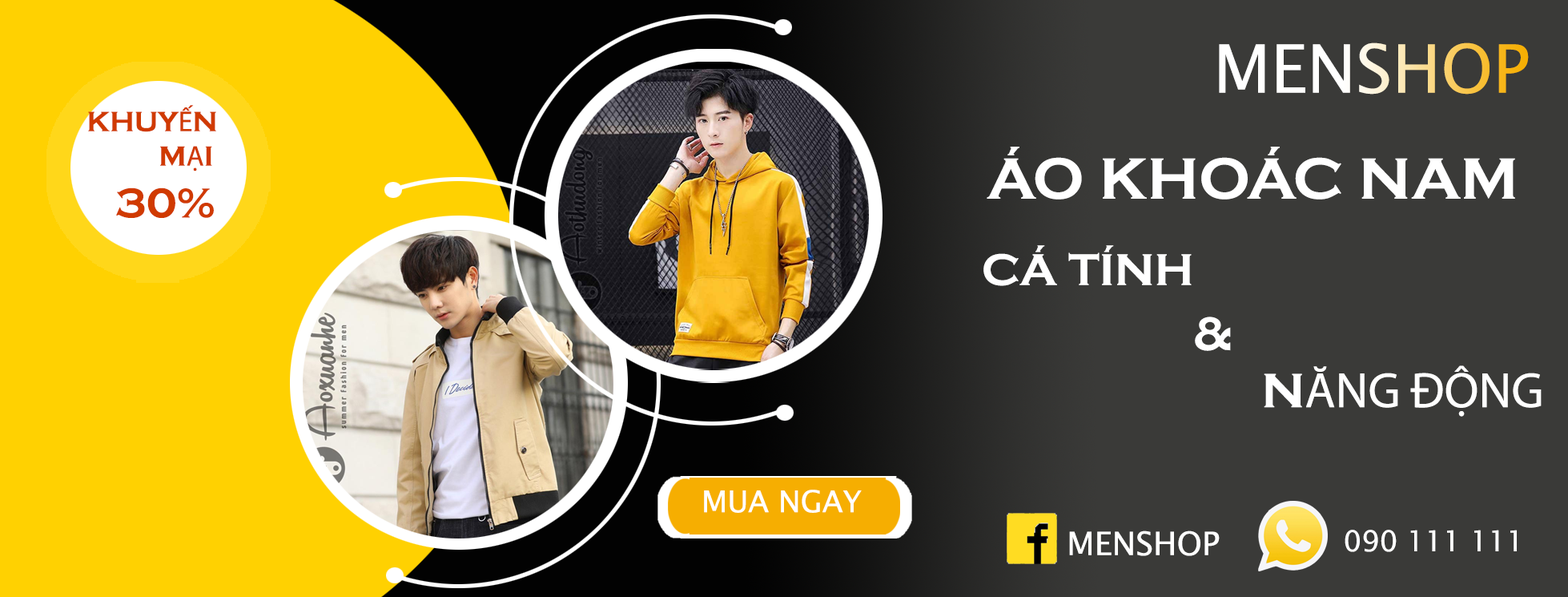
<style>
.page{position:relative;width:1568px;height:597px;background:#3a3a38}
.page>*{position:absolute;margin:0}
.t1{font:66.7px "LucidaSans"}
.t2{font:28.8px "CopperplateGothic-Bold";color:#d03a00}
.t3{font:28.8px "MyriadPro-Regular";color:#d03a00}
.t4{font:43.1px "CopperplateGothic-Bold";color:#d03a00}
.t5{font:60.1px "CopperplateGothic-Bold";color:#ffffff}
.t6{font:45.9px "CopperplateGothic-Bold";color:#ffffff}
.t7{font:48.6px "CopperplateGothic-Bold";color:#ffffff}
.t8{font:49.8px "MyriadPro-Regular";color:#ffffff}
.t9{font:49.8px "CopperplateGothic-Bold";color:#ffffff}
.t10{font:30px "LucidaSans";color:#ffffff}
.t11{font:32.3px "LucidaSans";color:#ffffff}
.t12{font:28.6px "LucidaSans";color:#ffffff}
</style>
<div class="page">
<p class="t1" style="left:1219px;top:42px;width:310px;height:52px">MENSHOP</p>
<p class="t2" style="left:88px;top:105px;width:128px;height:113px">KHUY<span class="t3">Ế</span>N<br>          M<span class="t3">Ạ</span>I<br>    <span class="t4">30%</span></p>
<p class="t5" style="left:987px;top:147px;width:528px;height:52px">ÁO KHOÁC NAM</p>
<p class="t6" style="left:983px;top:245px;width:209px;height:41px">CÁ TÍNH</p>
<p class="t7" style="left:1195px;top:316px;width:36px;height:35px">&amp;</p>
<p class="t8" style="left:1264px;top:365px;width:278px;height:51px"><span class="t9">N</span>ĂNG ĐỘNG</p>
<p class="t10" style="left:704px;top:489px;width:158px;height:24px">MUA NGAY</p>
<p class="t11" style="left:1069px;top:530px;width:151px;height:26px">MENSHOP</p>
<p class="t12" style="left:1345px;top:529px;width:172px;height:23px">090 111 111</p>
</div>
